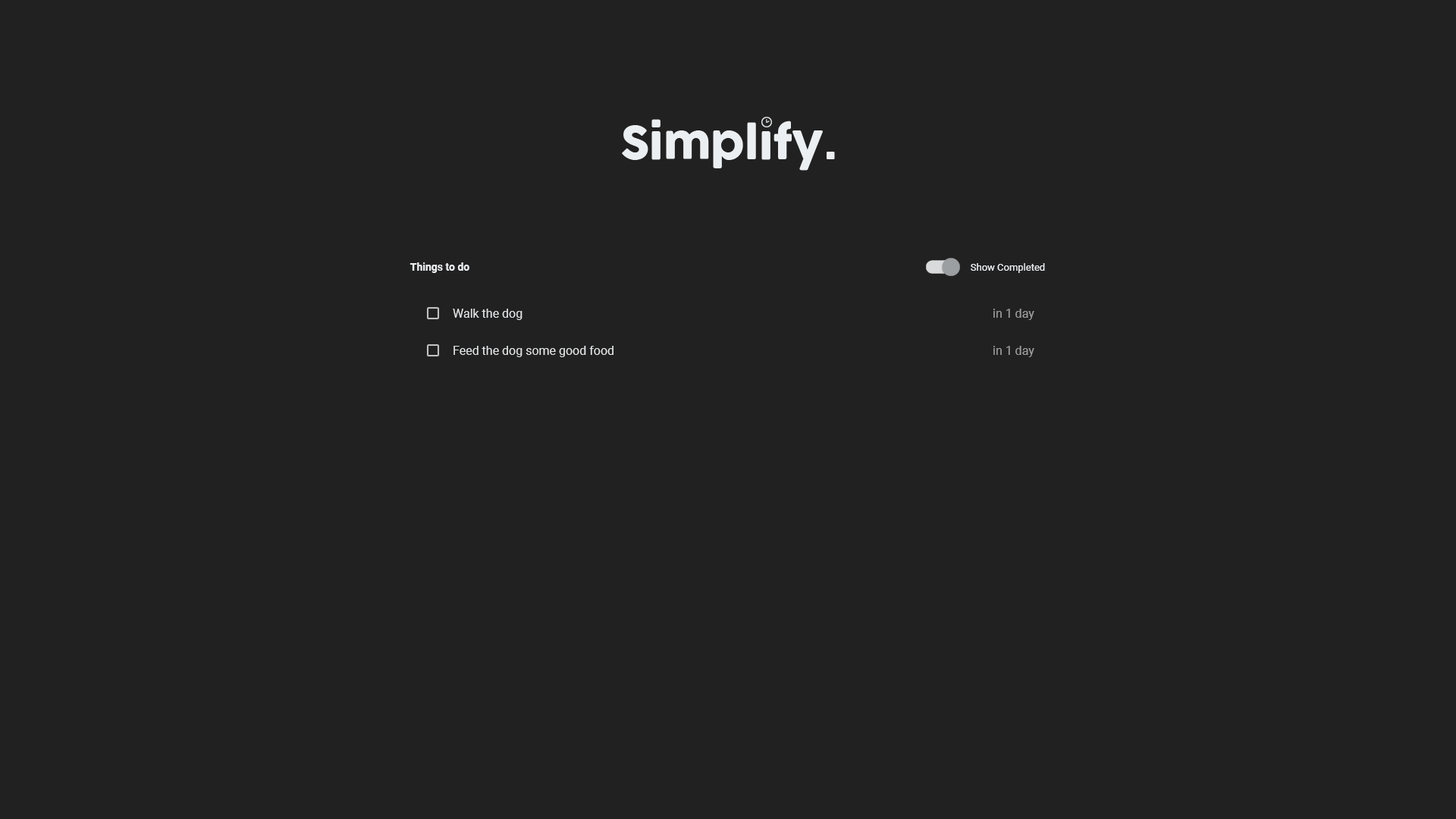
<style>
.page{position:relative;width:1456px;height:819px;background:#212121}
.page>*{position:absolute;margin:0}
.t1{font:10.6px "Roboto-Bold";color:#eceff1}
.t2{font:9.9px "Roboto-Regular";color:#eceff1}
.t3{font:12.1px "Roboto-Regular";color:#e3e5e7}
.t4{font:12.1px "Roboto-Regular";color:#9f9f9f}
</style>
<div class="page">
<p class="t1" style="left:409px;top:262px;width:60px;height:11px">Things to do</p>
<p class="t2" style="left:971px;top:263px;width:74px;height:10px">Show Completed</p>
<p class="t3" style="left:453px;top:309px;width:69px;height:11px">Walk the dog</p>
<p class="t4" style="left:993px;top:309px;width:41px;height:11px">in 1 day</p>
<p class="t3" style="left:453px;top:346px;width:160px;height:11px">Feed the dog some good food</p>
<p class="t4" style="left:993px;top:346px;width:41px;height:11px">in 1 day</p>
</div>
